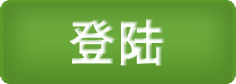
<style>
.page{position:relative;width:236px;height:84px}
.page>*{position:absolute;margin:0}
.t1{font:48px "SIL-Hei-Med-Jian";font-weight:bold}
</style>
<div class="page">
<p class="t1" style="left:69px;top:18px;width:96px;height:48px">登陆</p>
</div>
